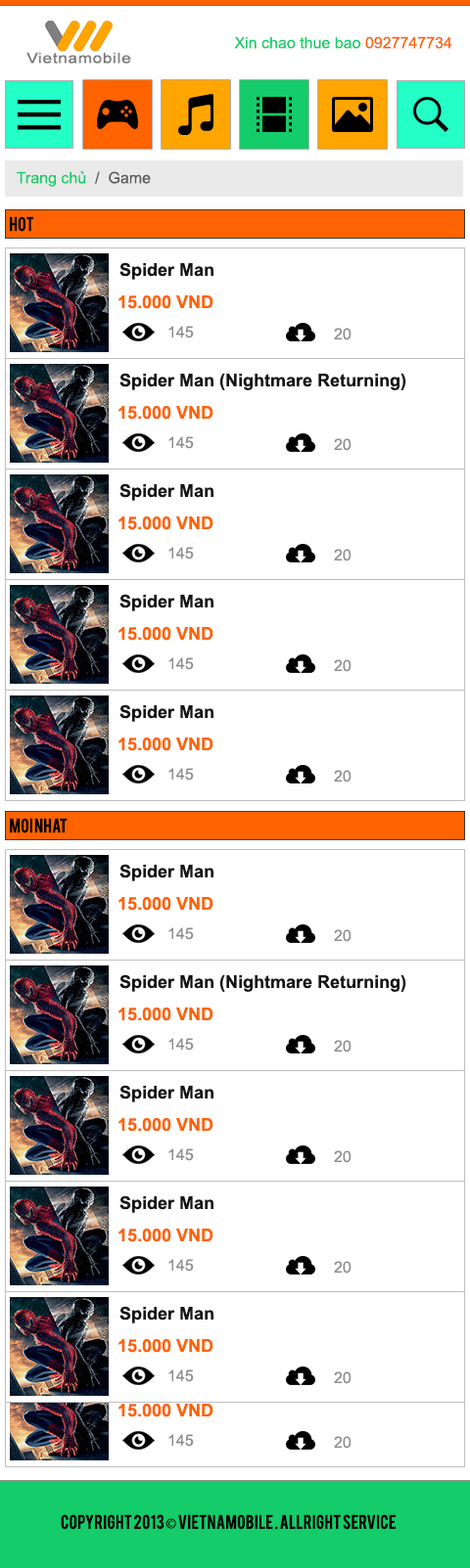
<style>
.page{position:relative;width:470px;height:1568px;background:#ffffff}
.page>*{position:absolute;margin:0}
.t1{font:15.7px "ArialMT";color:#14cc69}
.t2{font:15.7px "ArialMT";color:#ff6200}
.t3{font:15.7px "ArialMT";color:#5b5b5b}
.t4{font:15.7px "Bebas";color:#000000}
.t5{font:17.6px "Arial-BoldMT";color:#151515}
.t6{font:17.6px "Arial-BoldMT";color:#ff6200}
.t7{font:15.7px "ArialMT";color:#8d8d8d}
.t8{font:15.7px "MyriadPro-Regular";color:#000000}
</style>
<div class="page">
<p class="t1" style="left:234px;top:36px;width:218px;height:13px">Xin chao thue bao <span class="t2">0927747734</span></p>
<p class="t1" style="left:17px;top:171px;width:134px;height:16px">Trang chủ<span class="t3">  /  Game</span></p>
<p class="t4" style="left:10px;top:216px;width:23px;height:16px">hot</p>
<p class="t5" style="left:119px;top:262px;width:94px;height:18px">Spider Man</p>
<p class="t6" style="left:118px;top:295px;width:95px;height:14px">15.000 VND</p>
<p class="t7" style="left:168px;top:326px;width:26px;height:12px">145</p>
<p class="t7" style="left:334px;top:328px;width:17px;height:12px">20</p>
<p class="t5" style="left:119px;top:373px;width:287px;height:17px">Spider Man (Nightmare Returning)</p>
<p class="t6" style="left:118px;top:406px;width:95px;height:14px">15.000 VND</p>
<p class="t7" style="left:168px;top:436px;width:26px;height:13px">145</p>
<p class="t7" style="left:334px;top:438px;width:17px;height:13px">20</p>
<p class="t5" style="left:119px;top:483px;width:94px;height:18px">Spider Man</p>
<p class="t6" style="left:118px;top:516px;width:95px;height:14px">15.000 VND</p>
<p class="t7" style="left:168px;top:547px;width:26px;height:13px">145</p>
<p class="t7" style="left:334px;top:549px;width:17px;height:12px">20</p>
<p class="t5" style="left:119px;top:594px;width:94px;height:17px">Spider Man</p>
<p class="t6" style="left:118px;top:627px;width:95px;height:14px">15.000 VND</p>
<p class="t7" style="left:168px;top:657px;width:26px;height:13px">145</p>
<p class="t7" style="left:334px;top:659px;width:17px;height:13px">20</p>
<p class="t5" style="left:119px;top:704px;width:94px;height:18px">Spider Man</p>
<p class="t6" style="left:118px;top:738px;width:95px;height:13px">15.000 VND</p>
<p class="t7" style="left:168px;top:768px;width:26px;height:13px">145</p>
<p class="t7" style="left:334px;top:770px;width:17px;height:13px">20</p>
<p class="t4" style="left:10px;top:818px;width:57px;height:15px">Moi NHat</p>
<p class="t5" style="left:119px;top:864px;width:94px;height:17px">Spider Man</p>
<p class="t6" style="left:118px;top:897px;width:95px;height:14px">15.000 VND</p>
<p class="t7" style="left:168px;top:927px;width:26px;height:13px">145</p>
<p class="t7" style="left:334px;top:929px;width:17px;height:13px">20</p>
<p class="t5" style="left:119px;top:974px;width:287px;height:18px">Spider Man (Nightmare Returning)</p>
<p class="t6" style="left:118px;top:1008px;width:95px;height:13px">15.000 VND</p>
<p class="t7" style="left:168px;top:1038px;width:26px;height:13px">145</p>
<p class="t7" style="left:334px;top:1040px;width:17px;height:13px">20</p>
<p class="t5" style="left:119px;top:1085px;width:94px;height:17px">Spider Man</p>
<p class="t6" style="left:118px;top:1118px;width:95px;height:14px">15.000 VND</p>
<p class="t7" style="left:168px;top:1148px;width:26px;height:13px">145</p>
<p class="t7" style="left:334px;top:1150px;width:17px;height:13px">20</p>
<p class="t5" style="left:119px;top:1195px;width:94px;height:18px">Spider Man</p>
<p class="t6" style="left:118px;top:1229px;width:95px;height:13px">15.000 VND</p>
<p class="t7" style="left:168px;top:1259px;width:26px;height:13px">145</p>
<p class="t7" style="left:334px;top:1261px;width:17px;height:13px">20</p>
<p class="t5" style="left:119px;top:1306px;width:94px;height:17px">Spider Man</p>
<p class="t6" style="left:118px;top:1339px;width:95px;height:14px">15.000 VND</p>
<p class="t7" style="left:168px;top:1369px;width:26px;height:13px">145</p>
<p class="t7" style="left:334px;top:1371px;width:17px;height:13px">20</p>
<p class="t6" style="left:118px;top:1404px;width:95px;height:13px">15.000 VND</p>
<p class="t7" style="left:168px;top:1434px;width:26px;height:13px">145</p>
<p class="t7" style="left:334px;top:1436px;width:17px;height:13px">20</p>
<p class="t4" style="left:61px;top:1514px;width:334px;height:16px">Copyright 2013 <span class="t8">©</span> Vietnamobile . Allright service</p>
</div>
